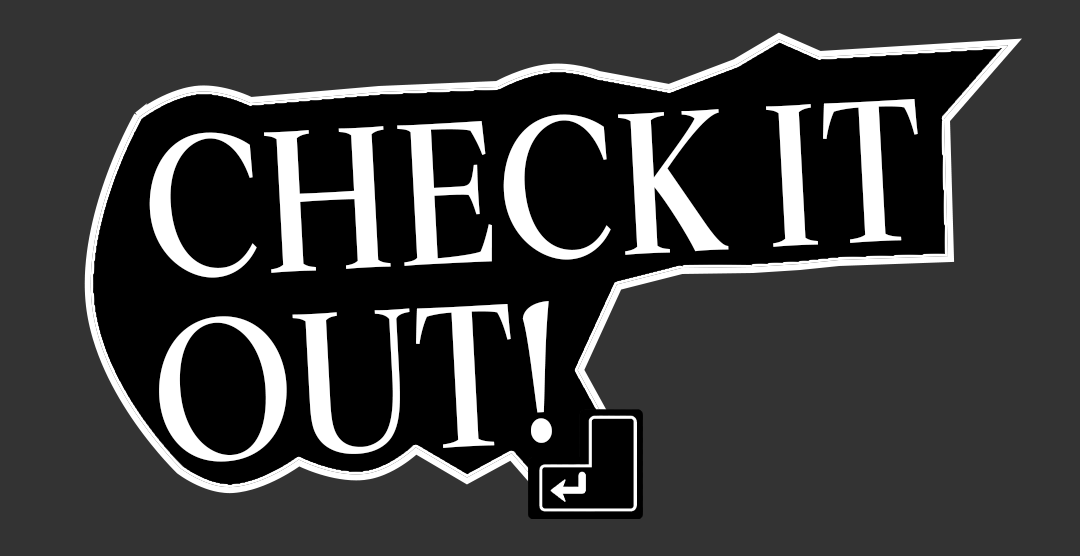
<style>
.page{position:relative;width:1080px;height:556px;background:#333333}
.page>*{position:absolute;margin:0}
.t1{font:200.2px/183.5px "KumlienPro-Condensed";color:#ffffff}
</style>
<div class="page">
<p class="t1" style="left:149px;top:99px;width:769px;height:363px;rotate:-3deg">CHECK IT<br>OUT!</p>
</div>
